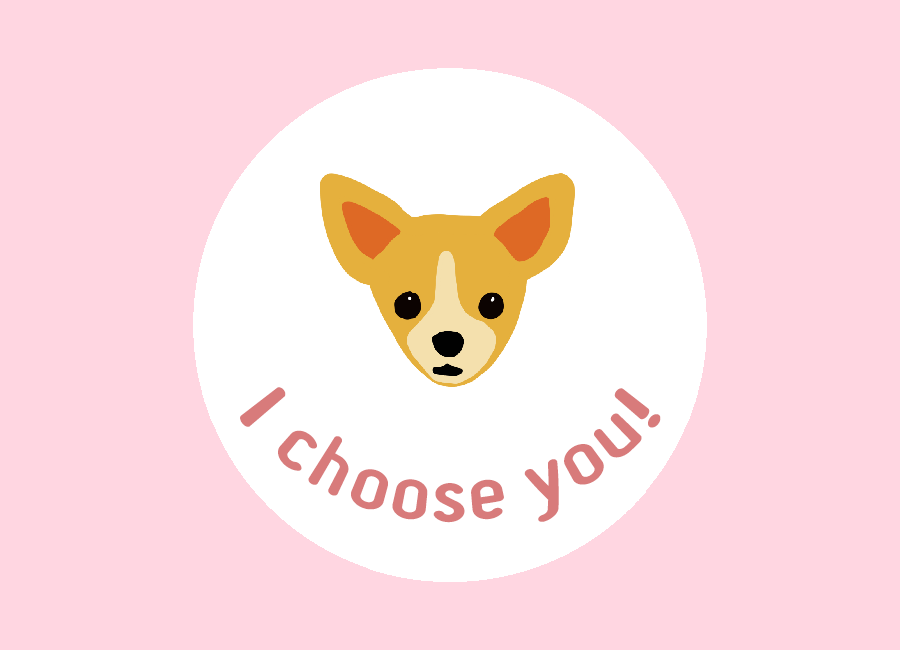
<style>
.page{position:relative;width:900px;height:650px;background:#ffd6e1}
.page>*{position:absolute;margin:0}
.t1{font:79.4px "Miso-Bold";color:#d87b7b}
</style>
<div class="page">
<p class="t1" style="left:240px;top:387px;width:421px;height:136px">I choose you!</p>
</div>
